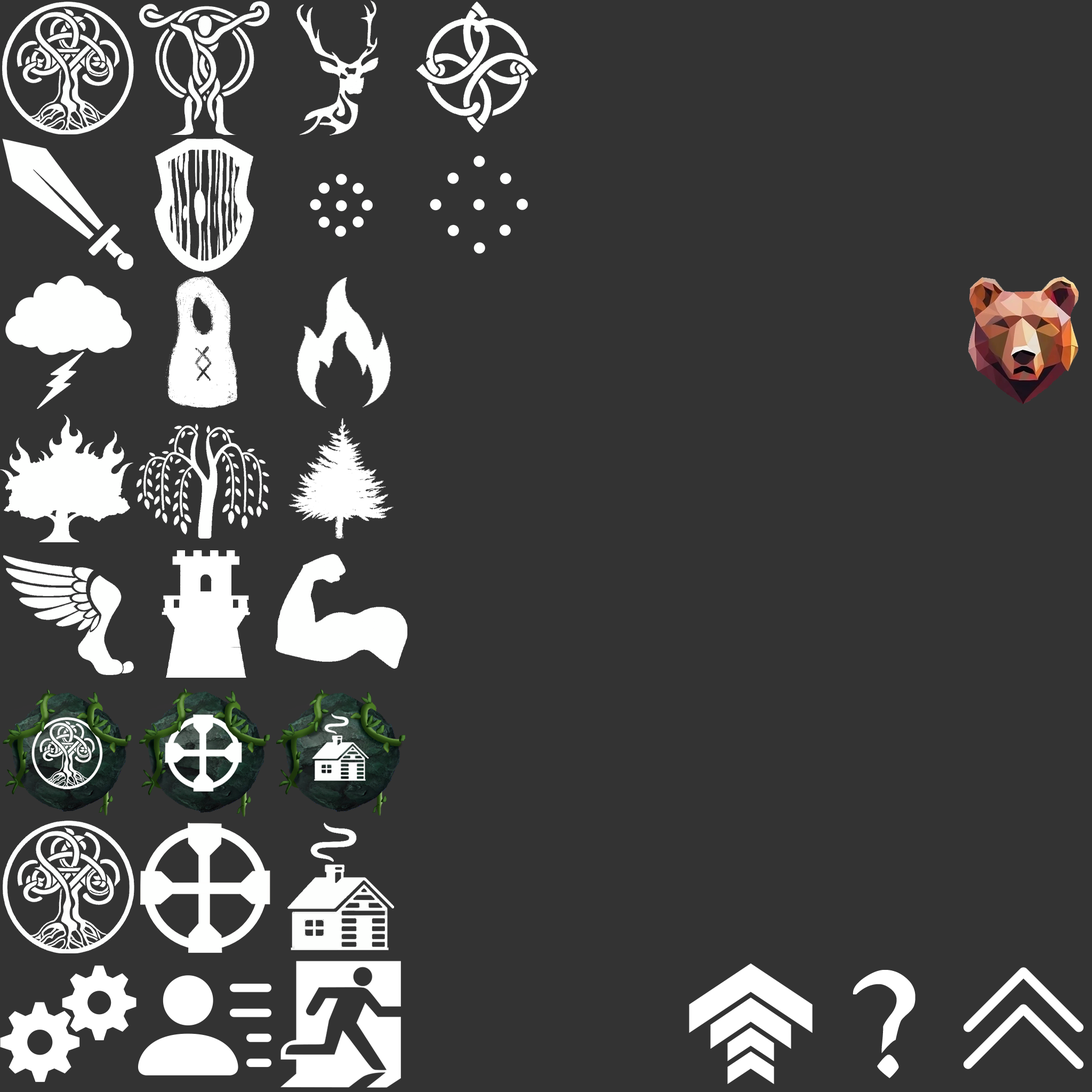
<style>
.page{position:relative;width:1092px;height:1092px;background:#333333}
.page>*{position:absolute;margin:0}
.t1{font:160px "MorrisRomanAlternate-Black";color:#ffffff}
</style>
<div class="page">
<p class="t1" style="left:853px;top:970px;width:62px;height:108px">?</p>
</div>
